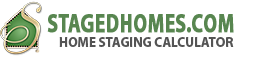
<style>
.page{position:relative;width:265px;height:57px;background:#ffffff}
.page>*{position:absolute;margin:0}
.t1{font:26.4px "MyriadPro-Bold";color:#588650;text-transform:uppercase;font-weight:bold;scale:0.73 1}
.t2{font:14px "MyriadPro-Bold";color:#545454;text-transform:uppercase;scale:0.95 1}
</style>
<div class="page">
<p class="t1" style="left:47px;top:14px;width:187px;height:19px">StagedHomes.com</p>
<p class="t2" style="left:59px;top:37px;width:175px;height:10px">Home Staging Calculator</p>
</div>
